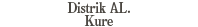
<style>
.page{position:relative;width:198px;height:27px;background:#ffffff}
.page>*{position:absolute;margin:0}
.t1{font:14px/13px "RyuminPro-ExBold";letter-spacing:-0.04em;color:#4c4843;scale:0.9 1}
</style>
<div class="page">
<p class="t1" style="left:67px;top:2px;width:63px;height:24px;text-align:center">Distrik AL.<br>Kure</p>
</div>
